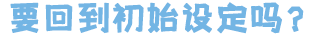
<style>
.page{position:relative;width:313px;height:35px;background:#ffffff}
.page>*{position:absolute;margin:0}
.t1{font:33.7px "shetumodengxiaofangti";color:#73b5e4;font-weight:bold}
</style>
<div class="page">
<p class="t1" style="left:10px;top:2px;width:294px;height:32px">要回到初始设定吗？</p>
</div>
